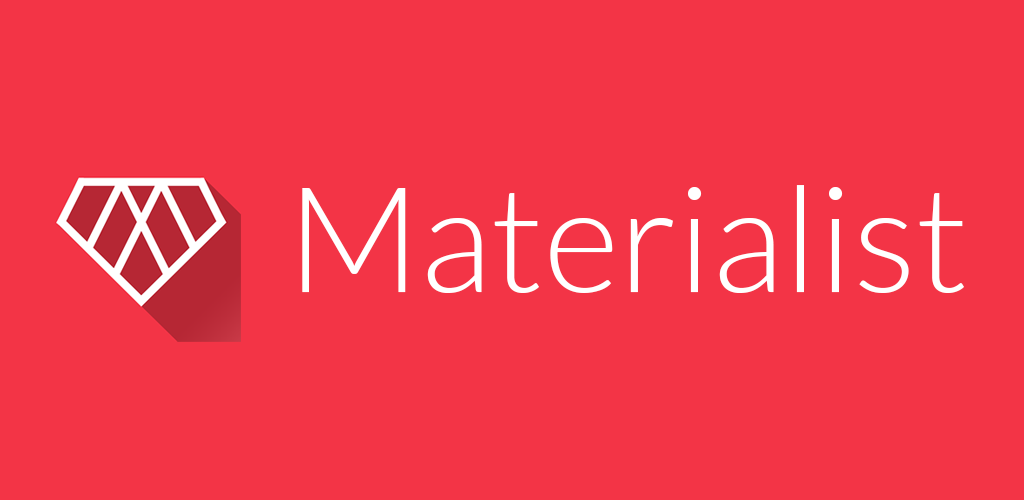
<style>
.page{position:relative;width:1024px;height:500px;background:#f33446}
.page>*{position:absolute;margin:0}
.t1{font:146.6px "Lato-Light";color:#ffffff}
</style>
<div class="page">
<p class="t1" style="left:302px;top:185px;width:662px;height:108px">Materialist</p>
</div>
